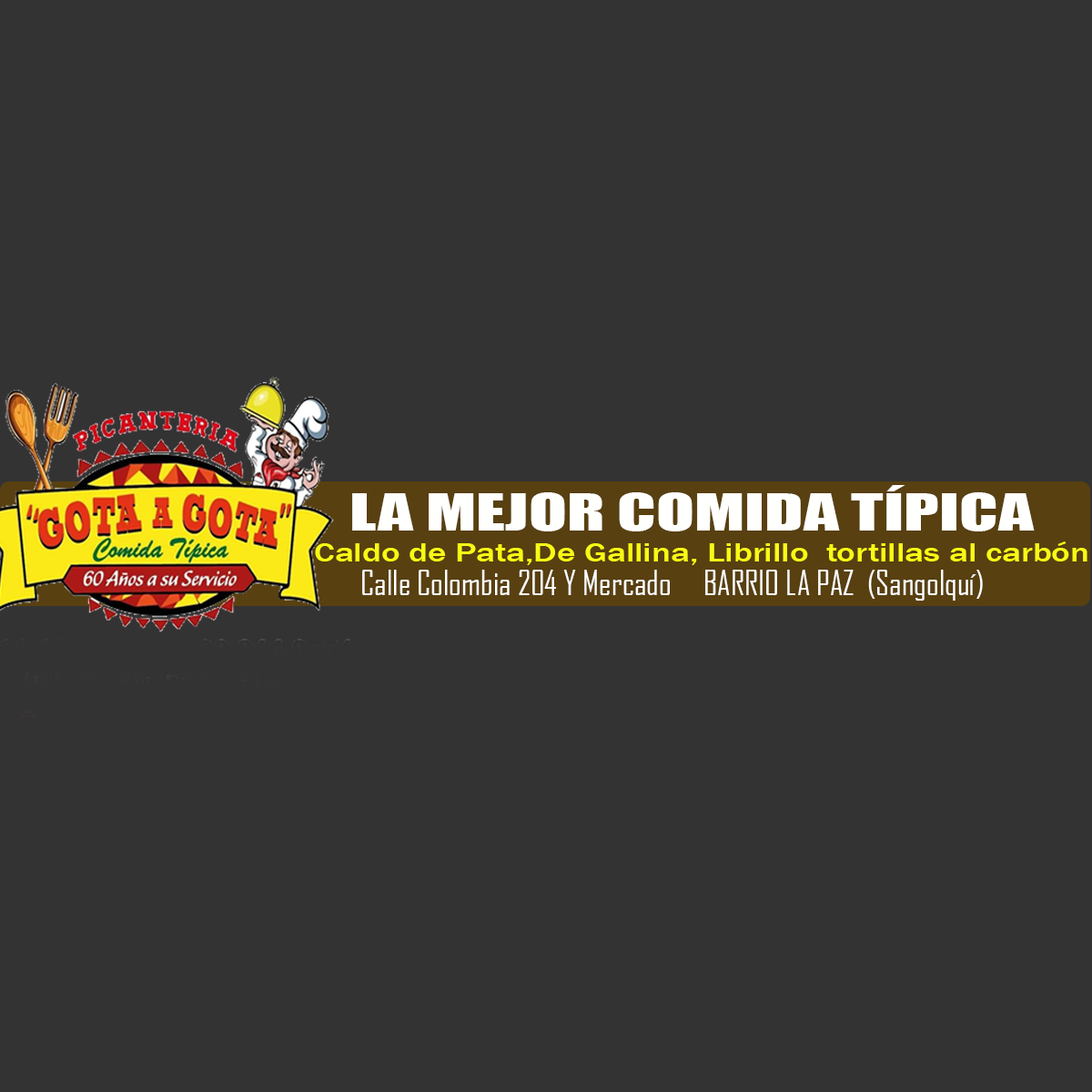
<style>
.page{position:relative;width:1092px;height:1092px;background:#333333}
.page>*{position:absolute;margin:0}
.t1{font:47.6px "Impact";color:#fffffe;scale:1.47 1}
.t2{font:26.4px "FranklinGothic-Medium";color:#f8fb14;scale:1.34 1}
.t3{font:32.8px "AgencyFB-Reg";color:#ffffff}
</style>
<div class="page">
<p class="t1" style="left:352px;top:485px;width:683px;height:46px">LA MEJOR COMIDA TÍPICA</p>
<p class="t2" style="left:315px;top:541px;width:772px;height:24px">Caldo de Pata,De Gallina, Librillo  tortillas al carbón</p>
<p class="t3" style="left:362px;top:570px;width:621px;height:31px">Calle Colombia 204 Y Mercado     BARRIO LA PAZ  (Sangolquí)</p>
</div>
